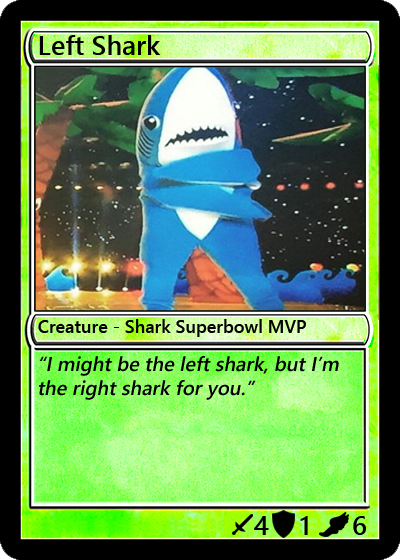
<style>
.page{position:relative;width:400px;height:560px}
.page>*{position:absolute;margin:0}
.t1{font:27px "YuGothicUI-Semibold";color:#000000}
.t2{font:18px "YuGothicUI-Semibold";color:#000000}
.t3{font:20px "YuGothicUI-Semibold";color:#000000;font-style:italic}
</style>
<div class="page">
<p class="t1" style="left:39px;top:35px;width:122px;height:20px">Left Shark</p>
<p class="t2" style="left:38px;top:319px;width:268px;height:18px">Creature - Shark Superbowl MVP</p>
<p class="t3" style="left:39px;top:356px;width:300px;height:44px">“I might be the left shark, but I’m the right shark for you.”</p>
<p class="t1" style="left:254px;top:516px;width:15px;height:19px">4</p>
<p class="t1" style="left:300px;top:516px;width:8px;height:19px">1</p>
<p class="t1" style="left:353px;top:516px;width:13px;height:19px">6</p>
</div>
